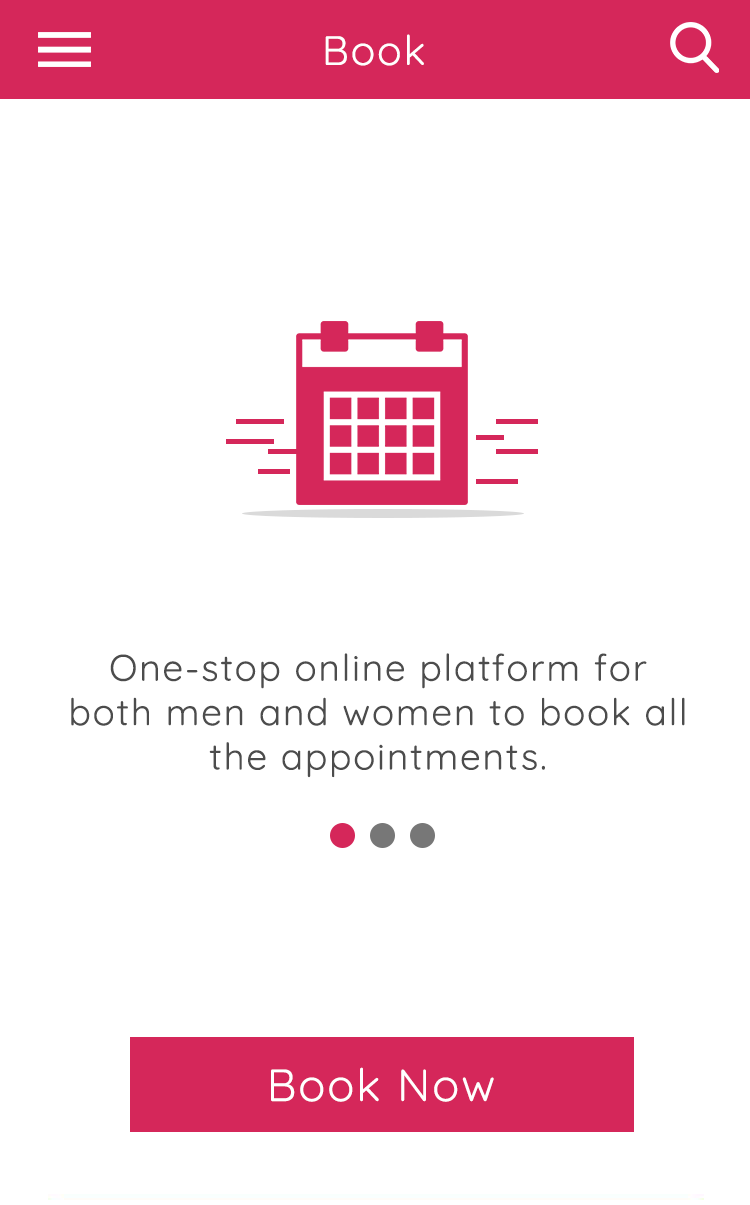
<style>
.page{position:relative;width:750px;height:1205px;background:#ffffff}
.page>*{position:absolute;margin:0}
.t1{font:41px "Quicksand-Regular";letter-spacing:0.05em;color:#ffffff}
.t2{font:37px "Quicksand-Regular";letter-spacing:0.05em;color:#4c4c4c}
.t3{font:45px "Quicksand-Regular";letter-spacing:0.05em;color:#ffffff}
</style>
<div class="page">
<p class="t1" style="left:325px;top:34px;width:99px;height:32px">Book</p>
<p class="t2" style="left:71px;top:653px;width:614px;height:125px;text-align:center">One-stop online platform for both men and women to book all the appointments.</p>
<p class="t3" style="left:271px;top:1067px;width:223px;height:35px">Book Now</p>
</div>
